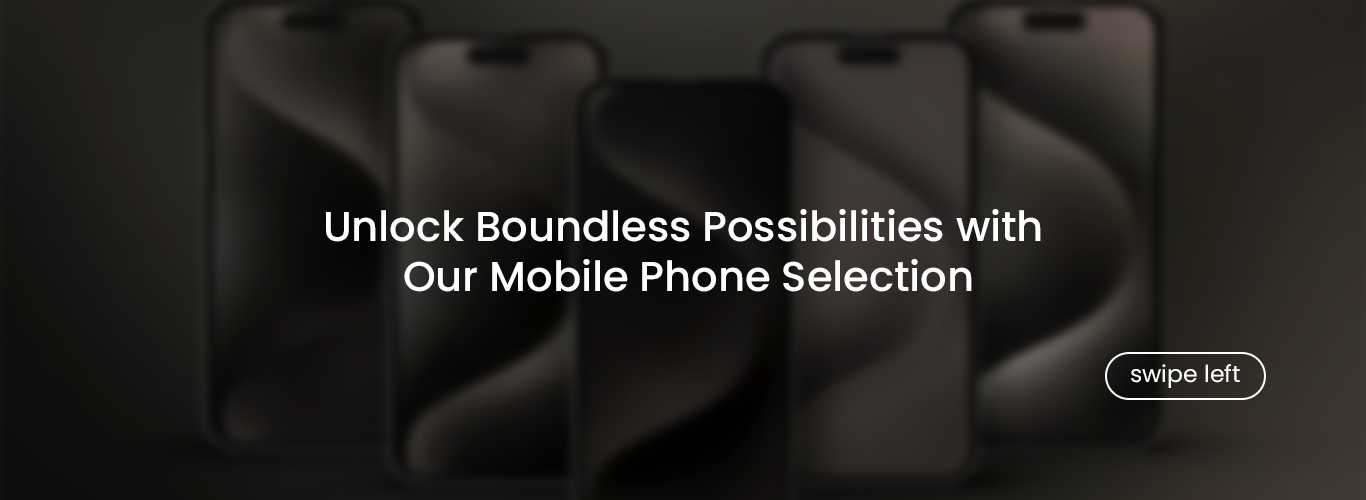
<style>
.page{position:relative;width:1366px;height:500px}
.page>*{position:absolute;margin:0}
.t1{font:41.7px "Poppins-Medium";color:#ffffff}
.t2{font:23.3px "Poppins-Regular";color:#ffffff}
</style>
<div class="page">
<p class="t1" style="left:326px;top:209px;width:715px;height:83px;text-align:center">Unlock Boundless Possibilities with<br> Our Mobile Phone Selection</p>
<p class="t2" style="left:1131px;top:364px;width:109px;height:24px">swipe left</p>
</div>
